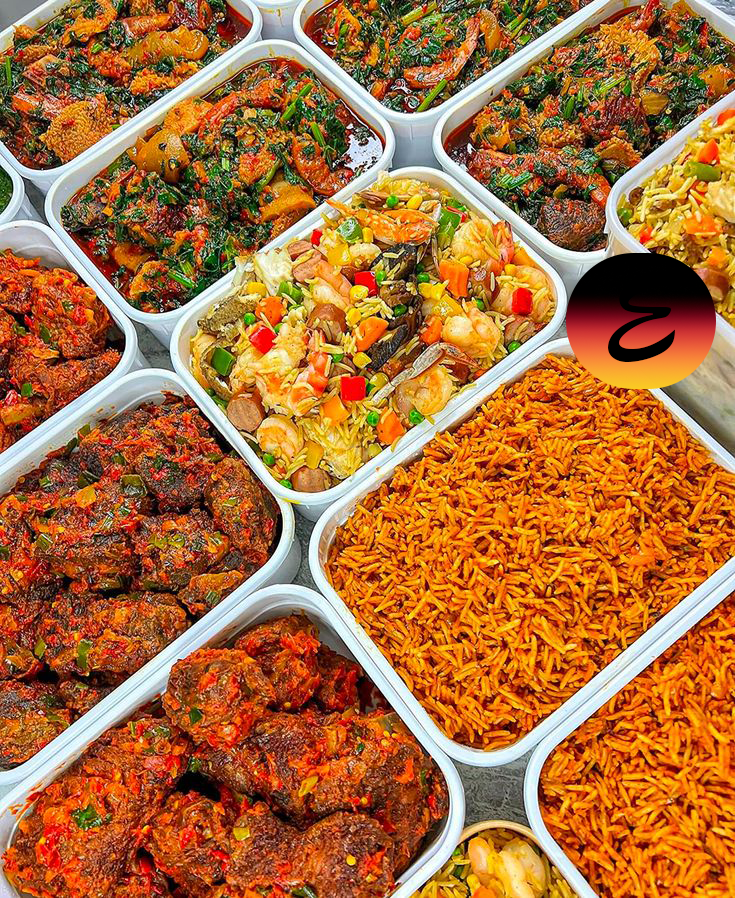
<style>
.page{position:relative;width:735px;height:898px}
.page>*{position:absolute;margin:0}
.t1{font:122.3px "BrushScriptMT";letter-spacing:0.01em;color:#000000}
</style>
<div class="page">
<p class="t1" style="left:608px;top:271px;width:76px;height:91px">E</p>
</div>
